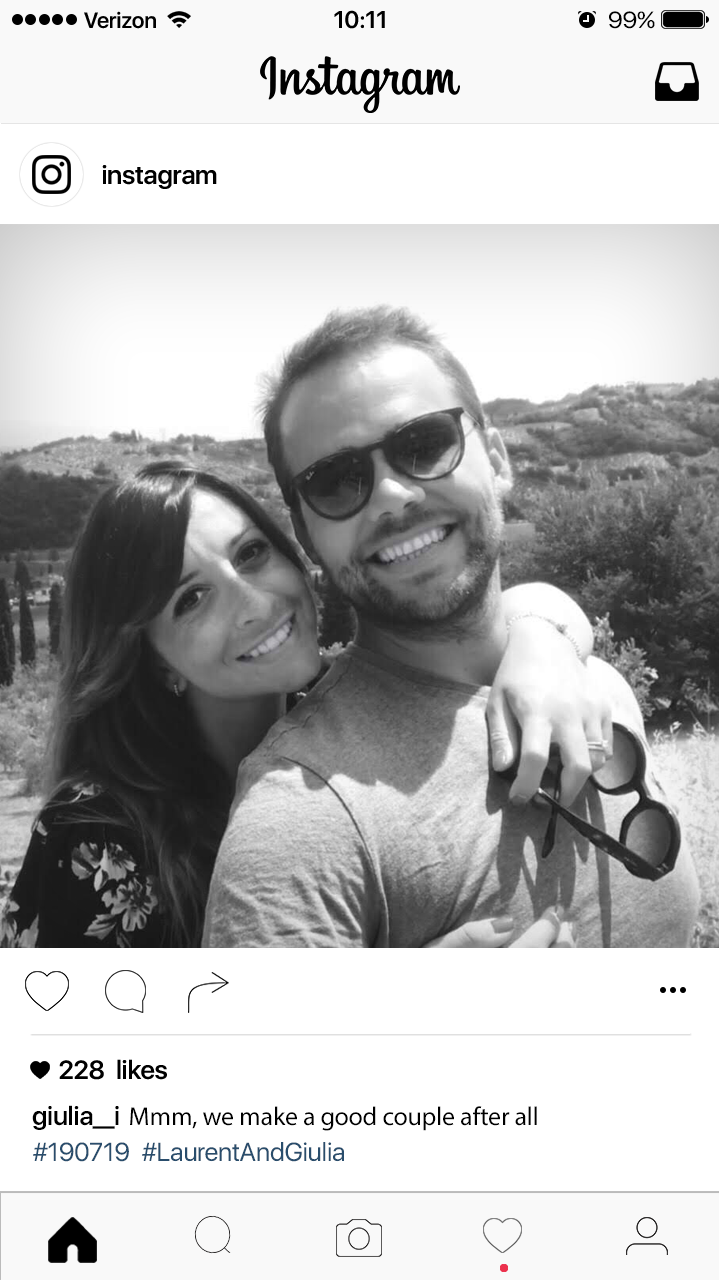
<style>
.page{position:relative;width:719px;height:1280px;background:#ffffff}
.page>*{position:absolute;margin:0}
.t1{font:22px "SFUIDisplay-Semibold";letter-spacing:-0.01em;color:#000000}
.t2{font:24px "SFUIDisplay-Semibold";letter-spacing:-0.01em;color:#000000}
.t3{font:23.2px "SFUIDisplay-Regular";letter-spacing:-0.01em;color:#000000;scale:1.07 1}
.t4{font:26px "SFUIDisplay-Semibold";letter-spacing:-0.01em;color:#000000}
.t5{font:26px "SFUIDisplay-Light";letter-spacing:-0.01em;color:#000000}
.t6{font:26px "SFUIDisplay-Regular";letter-spacing:-0.01em;color:#294d6c}
</style>
<div class="page">
<p class="t1" style="left:84px;top:11px;width:72px;height:18px">Verizon</p>
<p class="t2" style="left:334px;top:10px;width:51px;height:19px">10:11</p>
<p class="t3" style="left:609px;top:11px;width:46px;height:18px">99%</p>
<p class="t4" style="left:102px;top:165px;width:115px;height:24px">instagram</p>
<p class="t4" style="left:59px;top:1059px;width:108px;height:21px">228  likes</p>
<p class="t4" style="left:32px;top:1105px;width:87px;height:25px">giulia__i</p>
<p class="t5" style="left:130px;top:1106px;width:407px;height:25px">Mmm, we make a good couple after all</p>
<p class="t6" style="left:33px;top:1142px;width:311px;height:20px">#190719  #LaurentAndGiulia</p>
</div>
